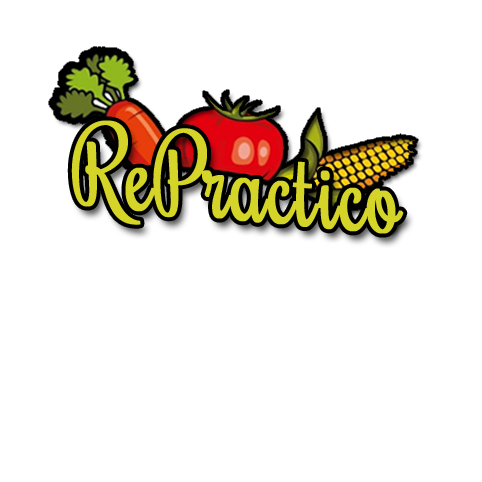
<style>
.page{position:relative;width:482px;height:482px;background:#ffffff}
.page>*{position:absolute;margin:0}
.t1{font:105.9px "Rochester-Regular";color:#d4d429;font-weight:bold;scale:0.78 1}
</style>
<div class="page">
<p class="t1" style="left:71px;top:120px;width:333px;height:114px;rotate:5deg">RePractico</p>
</div>
